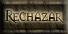
<style>
.page{position:relative;width:68px;height:34px}
.page>*{position:absolute;margin:0}
.t1{font:14px "Morpheus"}
</style>
<div class="page">
<p class="t1" style="left:5px;top:10px;width:60px;height:13px">Rechazar</p>
</div>
